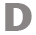
<style>
.page{position:relative;width:36px;height:35px;background:#ffffff}
.page>*{position:absolute;margin:0}
.t1{font:40px "StoneSansITC-Bold";color:#898585}
</style>
<div class="page">
<p class="t1" style="left:5px;top:3px;width:27px;height:28px">D</p>
</div>
